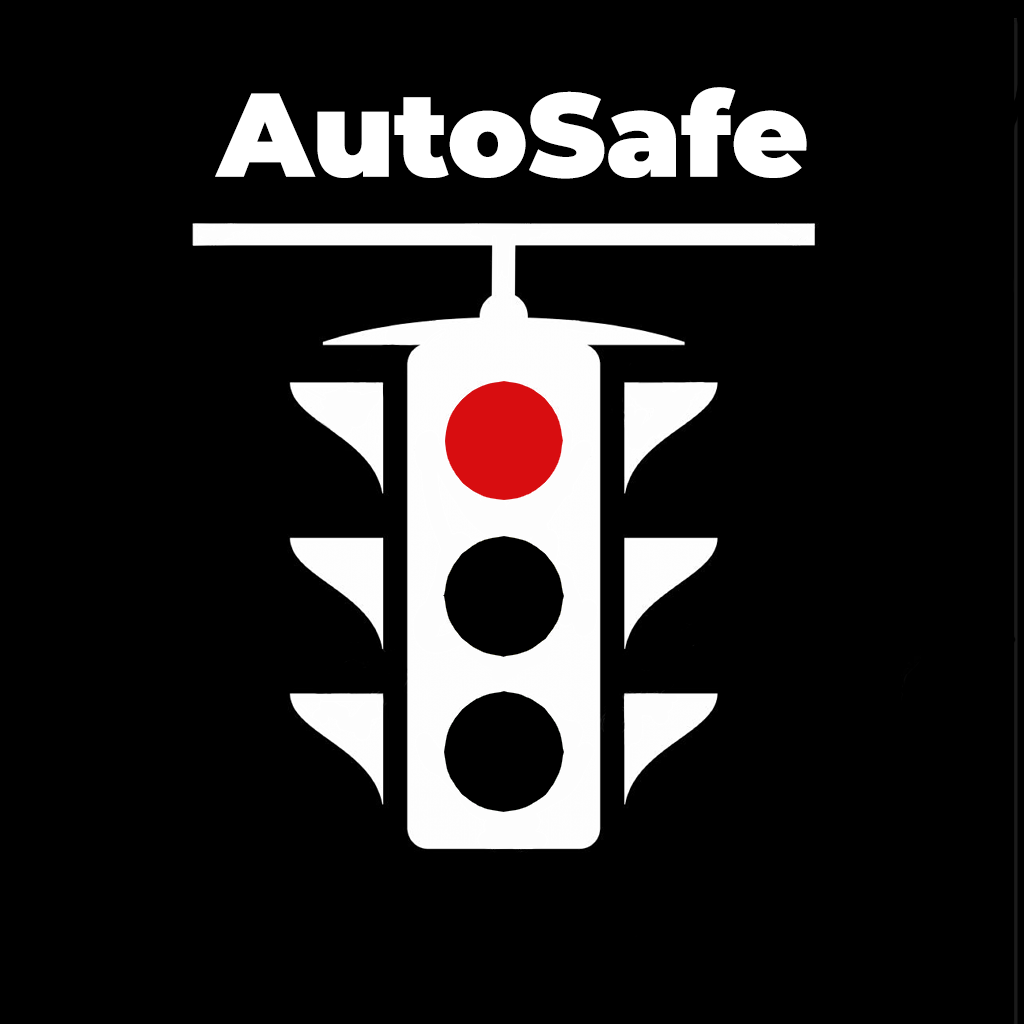
<style>
.page{position:relative;width:1024px;height:1024px;background:#000000}
.page>*{position:absolute;margin:0}
.t1{font:118.6px "Montserrat-Black";color:#ffffff}
</style>
<div class="page">
<p class="t1" style="left:215px;top:87px;width:592px;height:92px">AutoSafe</p>
</div>
